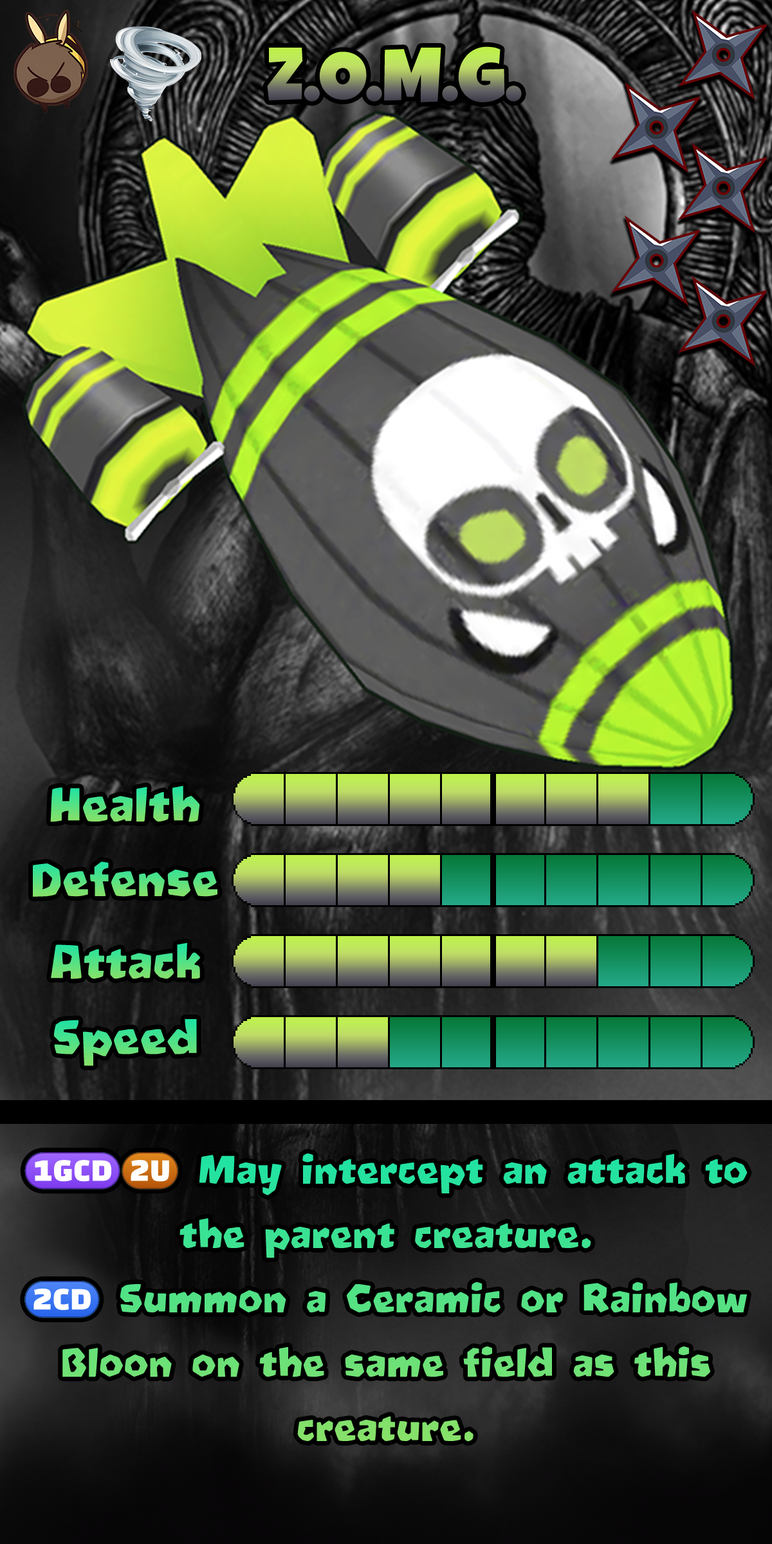
<style>
.page{position:relative;width:772px;height:1544px}
.page>*{position:absolute;margin:0}
.t1{font:128.7px "LuckiestGuy-Regular"}
.t2{font:77.2px "Oetztype"}
.t3{font:64.3px/64.3px "Oetztype"}
.t4{font:64.3px/64.3px "stoogedings-Regular"}
</style>
<div class="page">
<p class="t1" style="left:267px;top:46px;width:255px;height:56px">Z.O.M.G.</p>
<p class="t2" style="left:50px;top:786px;width:150px;height:36px">Health</p>
<p class="t2" style="left:33px;top:862px;width:184px;height:35px">Defense</p>
<p class="t2" style="left:51px;top:943px;width:149px;height:36px">Attack</p>
<p class="t2" style="left:54px;top:1019px;width:143px;height:47px">Speed</p>
<p class="t3" style="left:24px;top:1152px;width:724px;height:290px;text-align:center"><span class="t4">(1GCD)(2U)</span> May intercept an attack to the parent creature.<br><span class="t4">(2CD)</span> Summon a Ceramic or Rainbow Bloon on the same field as this creature.</p>
</div>
